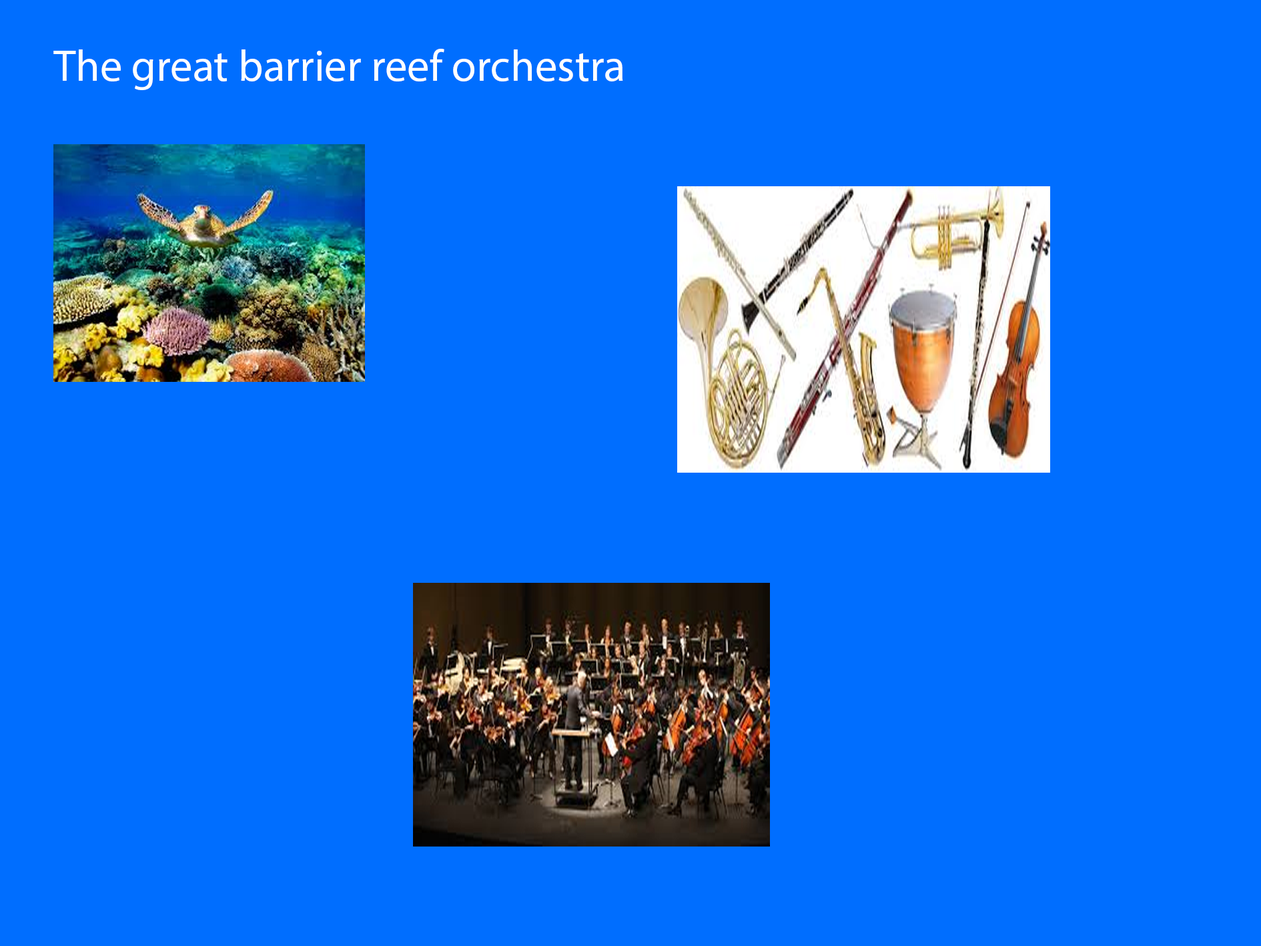
<style>
.page{position:relative;width:1261px;height:946px;background:#006eff}
.page>*{position:absolute;margin:0}
.t1{font:44.5px "MyriadPro-Regular";color:#ffffff}
</style>
<div class="page">
<p class="t1" style="left:53px;top:49px;width:570px;height:41px">The great barrier reef orchestra</p>
</div>
